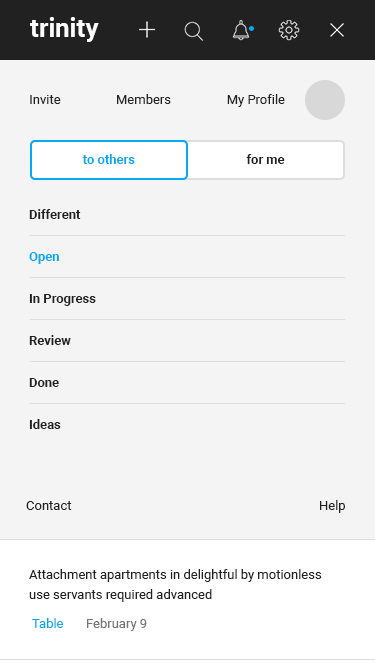
<style>
.page{position:relative;width:375px;height:667px;background:#f4f4f4}
.page>*{position:absolute;margin:0}
.t1{font:26px "Roboto-Bold";color:#ffffff}
.t2{font:13px "Roboto-Regular";color:#212121}
.t3{font:13px "Roboto-Bold";color:#03a9f4}
.t4{font:13px "Roboto-Bold";color:#212121}
.t5{font:13px/20px "Roboto-Regular";color:#212121}
.t6{font:13px "Roboto-Regular";color:#757575}
.t7{font:13px "Roboto-Regular";color:#03a9f4}
</style>
<div class="page">
<p class="t1" style="left:30px;top:17px;width:69px;height:25px">trinity</p>
<p class="t2" style="left:30px;top:95px;width:31px;height:9px">Invite</p>
<p class="t2" style="left:117px;top:94px;width:54px;height:10px">Members</p>
<p class="t2" style="left:227px;top:94px;width:58px;height:13px">My Profile</p>
<p class="t3" style="left:82px;top:154px;width:53px;height:10px">to others</p>
<p class="t4" style="left:246px;top:154px;width:39px;height:10px">for me</p>
<p class="t4" style="left:29px;top:209px;width:52px;height:10px">Different</p>
<p class="t3" style="left:29px;top:252px;width:30px;height:12px">Open</p>
<p class="t4" style="left:29px;top:294px;width:67px;height:12px">In Progress</p>
<p class="t4" style="left:29px;top:335px;width:42px;height:10px">Review</p>
<p class="t4" style="left:29px;top:378px;width:30px;height:9px">Done</p>
<p class="t4" style="left:29px;top:419px;width:32px;height:10px">Ideas</p>
<p class="t2" style="left:26px;top:501px;width:46px;height:9px">Contact</p>
<p class="t2" style="left:320px;top:500px;width:25px;height:13px">Help</p>
<p class="t5" style="left:29px;top:569px;width:293px;height:33px">Attachment apartments in delightful by motionless use servants required advanced</p>
<p class="t6" style="left:32px;top:618px;width:115px;height:13px"><span class="t7"> Table       </span>February 9</p>
</div>
